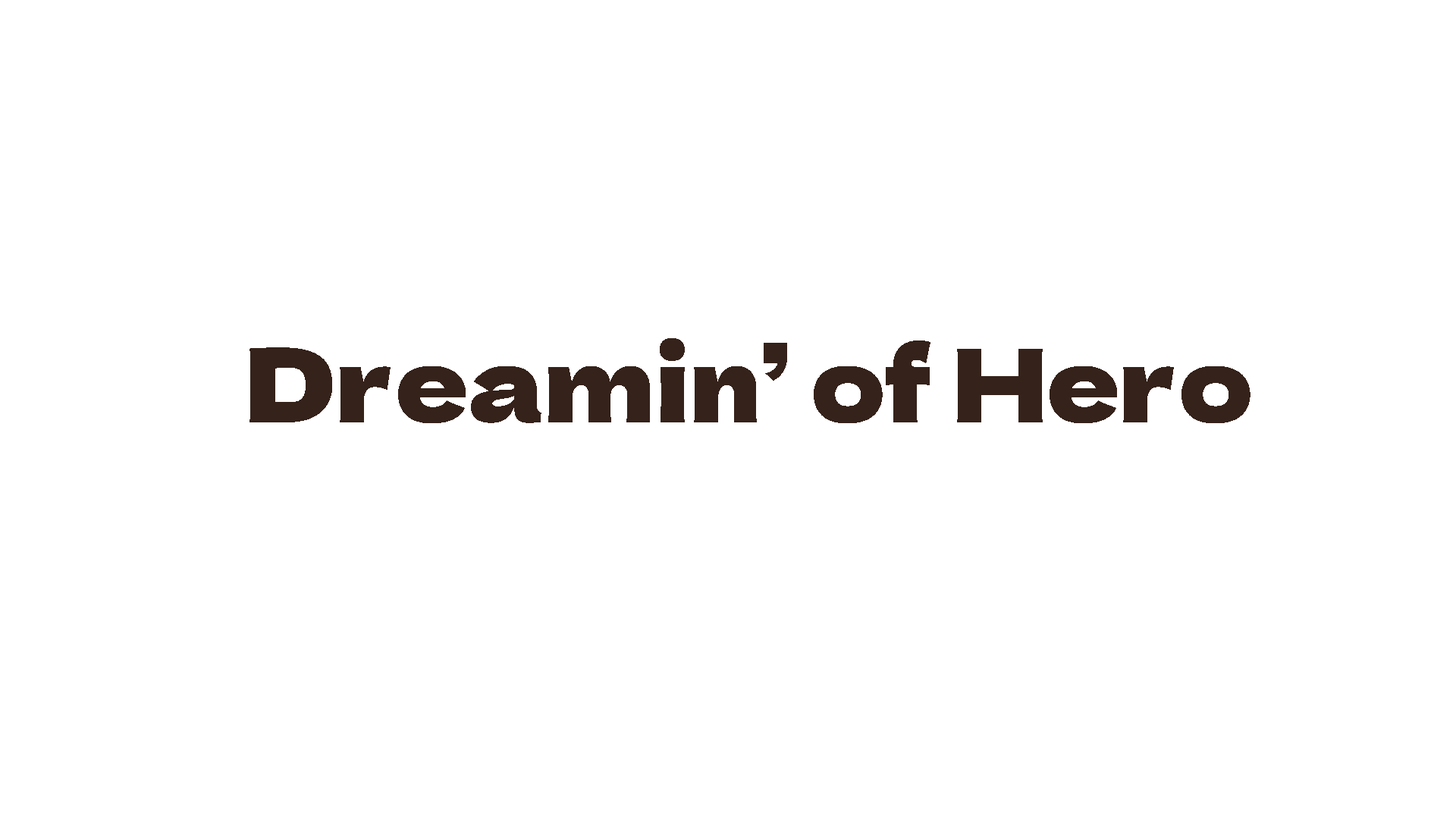
<style>
.page{position:relative;width:1456px;height:819px;background:#ffffff}
.page>*{position:absolute;margin:0}
.t1{font:101.4px "DelaGothicOne-Regular";color:#35221a}
</style>
<div class="page">
<p class="t1" style="left:249px;top:338px;width:1001px;height:85px">Dreamin’ of Hero</p>
</div>
